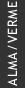
<style>
.page{position:relative;width:25px;height:88px;background:#333333}
.page>*{position:absolute;margin:0}
.t1{font:13px "TrebuchetMS";letter-spacing:0.07em;color:#ffffff}
</style>
<div class="page">
<p class="t1" style="left:7px;top:1px;width:11px;height:85px;rotate:-90deg">ALMA/VERME</p>
</div>
